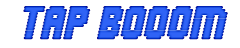
<style>
.page{position:relative;width:240px;height:48px;background:#ffffff}
.page>*{position:absolute;margin:0}
.t1{font:36px "Abduction";color:#2f63f6}
</style>
<div class="page">
<p class="t1" style="left:23px;top:6px;width:205px;height:34px">Tap booom</p>
</div>
